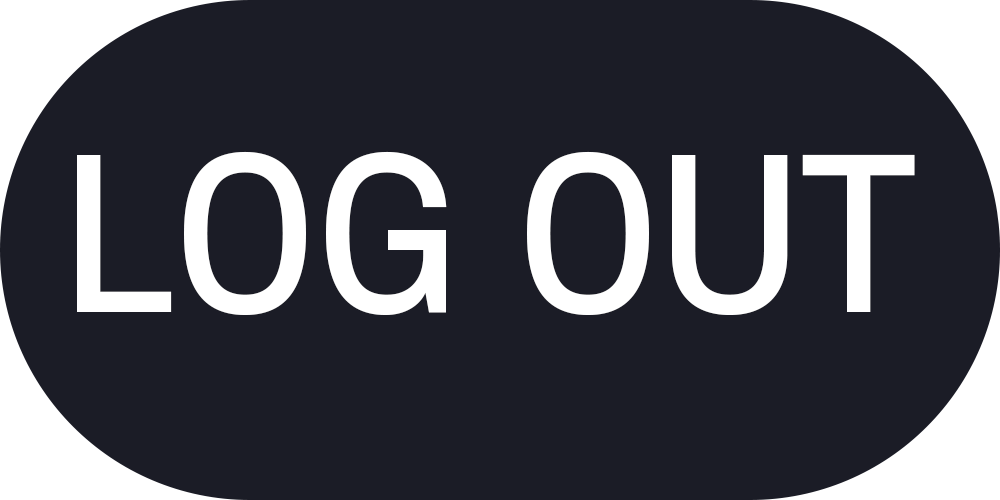
<style>
.page{position:relative;width:1000px;height:500px;background:#1b1c26}
.page>*{position:absolute;margin:0}
.t1{font:200px "S-CoreDream-5Medium";color:#ffffff}
</style>
<div class="page">
<p class="t1" style="left:77px;top:151px;width:838px;height:164px">LOG OUT</p>
</div>
